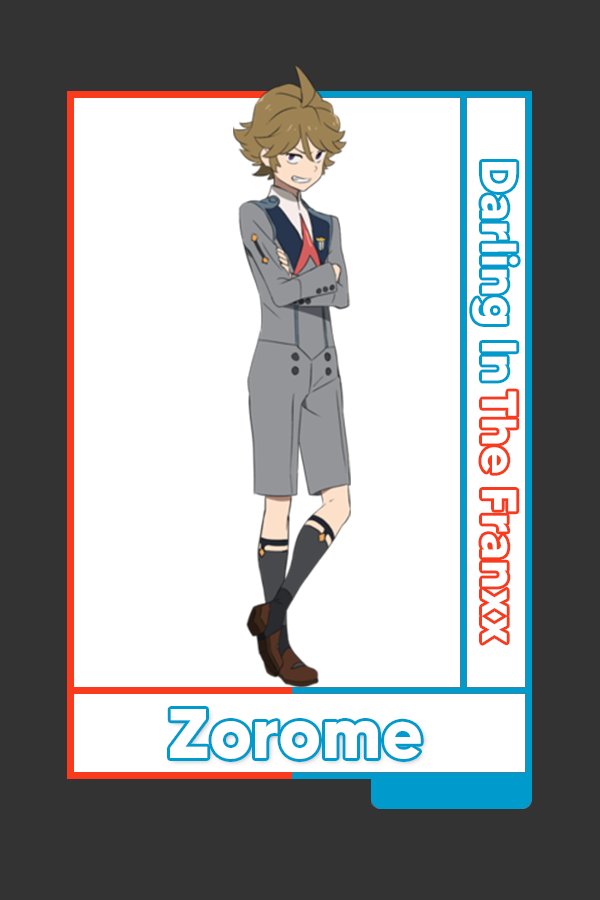
<style>
.page{position:relative;width:600px;height:900px;background:#ffffff}
.page>*{position:absolute;margin:0}
.t1{font:48.8px "MADETOMMY-Bold";color:#ffffff}
.t2{font:70.1px "MADETOMMY-Bold";color:#ffffff}
</style>
<div class="page">
<p class="t1" style="left:472px;top:162px;width:46px;height:219px;rotate:90deg">Darling In</p>
<p class="t1" style="left:481px;top:391px;width:36px;height:252px;rotate:90deg">The Franxx</p>
<p class="t2" style="left:170px;top:709px;width:251px;height:50px">Zorome</p>
</div>
